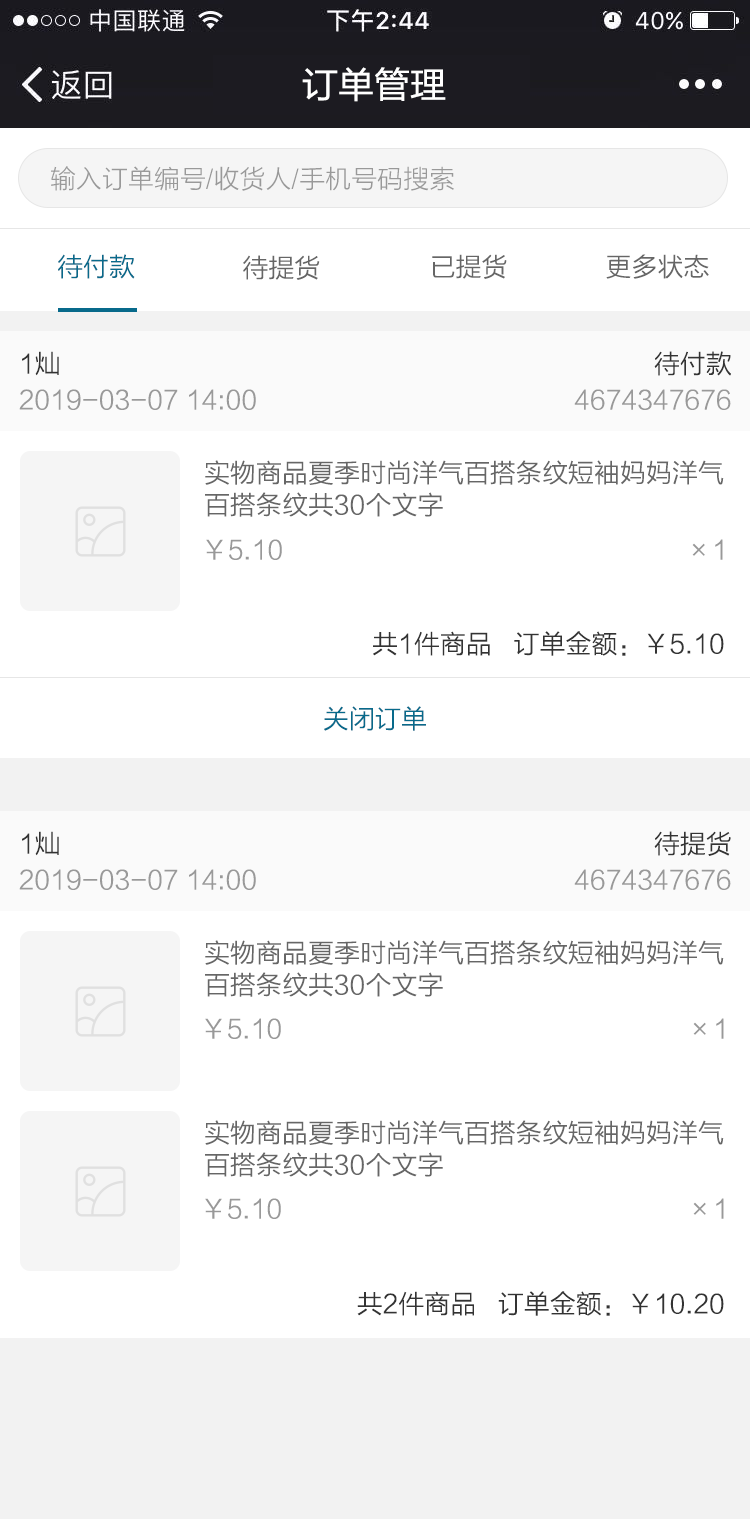
<style>
.page{position:relative;width:750px;height:1519px;background:#ffffff}
.page>*{position:absolute;margin:0}
.t1{font:36px "FZLTHK--GBK1-0";color:#ffffff}
.t2{font:26px "FZLTXHK";color:#999999}
.t3{font:26px "FZLTXHK";color:#086a8b}
.t4{font:26px "FZLTXHK";color:#666666}
.t5{font:26px "FZLTXHK";color:#333333}
.t6{font:26px/32px "FZLTXHK";color:#666666}
</style>
<div class="page">
<p class="t1" style="left:302px;top:67px;width:144px;height:35px">订单管理</p>
<p class="t2" style="left:51px;top:166px;width:403px;height:25px">输入订单编号/收货人/手机号码搜索</p>
<p class="t3" style="left:58px;top:254px;width:77px;height:25px">待付款</p>
<p class="t4" style="left:243px;top:255px;width:77px;height:25px">待提货</p>
<p class="t4" style="left:432px;top:254px;width:75px;height:25px">已提货</p>
<p class="t4" style="left:606px;top:254px;width:103px;height:25px">更多状态</p>
<p class="t5" style="left:22px;top:351px;width:37px;height:25px">1灿</p>
<p class="t5" style="left:654px;top:351px;width:77px;height:25px">待付款</p>
<p class="t2" style="left:19px;top:389px;width:237px;height:21px">2019-03-07 14:00</p>
<p class="t2" style="left:574px;top:389px;width:157px;height:21px">4674347676</p>
<p class="t6" style="left:205px;top:460px;width:519px;height:57px">实物商品夏季时尚洋气百搭条纹短袖妈妈洋气<br>百搭条纹共30个文字</p>
<p class="t2" style="left:206px;top:539px;width:76px;height:21px">￥5.10</p>
<p class="t2" style="left:692px;top:539px;width:31px;height:21px">×1</p>
<p class="t5" style="left:373px;top:631px;width:351px;height:25px">共1件商品   订单金额：￥5.10</p>
<p class="t3" style="left:324px;top:706px;width:102px;height:25px">关闭订单</p>
<p class="t5" style="left:22px;top:831px;width:37px;height:25px">1灿</p>
<p class="t5" style="left:654px;top:831px;width:77px;height:25px">待提货</p>
<p class="t2" style="left:19px;top:869px;width:237px;height:21px">2019-03-07 14:00</p>
<p class="t2" style="left:574px;top:869px;width:157px;height:21px">4674347676</p>
<p class="t6" style="left:205px;top:940px;width:519px;height:57px">实物商品夏季时尚洋气百搭条纹短袖妈妈洋气<br>百搭条纹共30个文字</p>
<p class="t2" style="left:205px;top:1018px;width:76px;height:21px">￥5.10</p>
<p class="t2" style="left:693px;top:1018px;width:31px;height:21px">×1</p>
<p class="t6" style="left:205px;top:1120px;width:519px;height:57px">实物商品夏季时尚洋气百搭条纹短袖妈妈洋气<br>百搭条纹共30个文字</p>
<p class="t2" style="left:205px;top:1198px;width:76px;height:21px">￥5.10</p>
<p class="t2" style="left:693px;top:1198px;width:31px;height:21px">×1</p>
<p class="t5" style="left:357px;top:1291px;width:367px;height:25px">共2件商品   订单金额：￥10.20</p>
</div>
